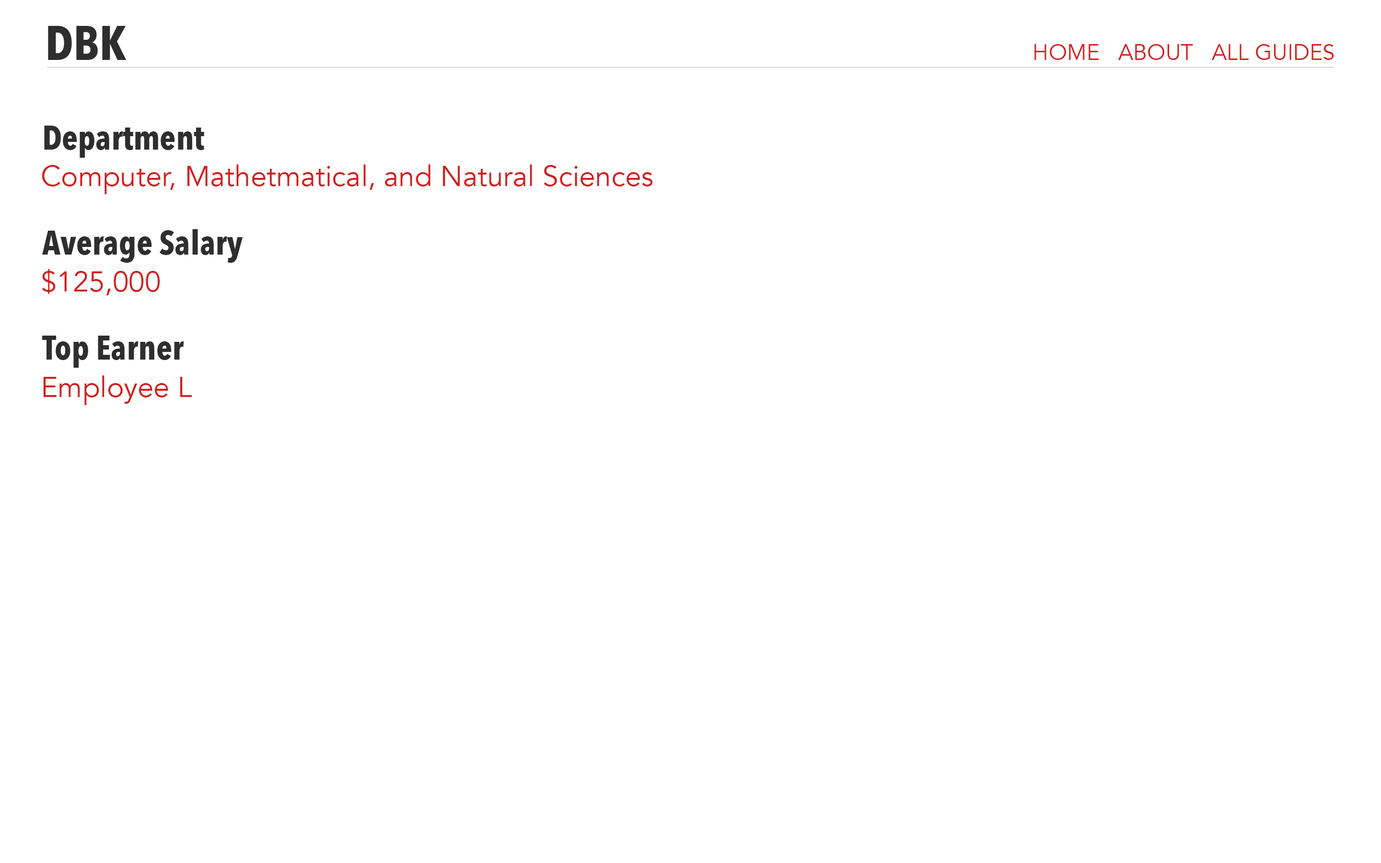
<style>
.page{position:relative;width:1381px;height:863px;background:#ffffff}
.page>*{position:absolute;margin:0}
.t1{font:48px "AvenirNextCondensed-Bold";color:#2e2e2e}
.t2{font:22.1px "Avenir-Book";color:#d41d1d}
.t3{font:33.6px "AvenirNextCondensed-Bold";color:#2e2e2e}
.t4{font:28.8px "Avenir-Book";color:#d41d1d}
</style>
<div class="page">
<p class="t1" style="left:48px;top:26px;width:79px;height:34px">DBK</p>
<p class="t2" style="left:1035px;top:44px;width:299px;height:16px">HOME   ABOUT   ALL GUIDES</p>
<p class="t3" style="left:44px;top:126px;width:160px;height:32px">Department</p>
<p class="t4" style="left:42px;top:165px;width:611px;height:29px">Computer, Mathetmatical, and Natural Sciences</p>
<p class="t3" style="left:42px;top:229px;width:201px;height:34px">Average Salary</p>
<p class="t4" style="left:42px;top:269px;width:118px;height:26px">$125,000</p>
<p class="t3" style="left:42px;top:336px;width:142px;height:32px">Top Earner</p>
<p class="t4" style="left:43px;top:376px;width:149px;height:29px">Employee L</p>
</div>
